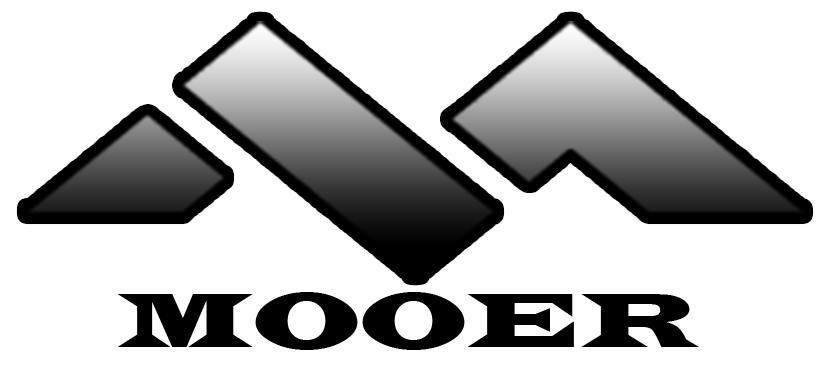
<style>
.page{position:relative;width:840px;height:384px;background:#ffffff}
.page>*{position:absolute;margin:0}
.t1{font:80px "LatinWide";color:#000000}
</style>
<div class="page">
<p class="t1" style="left:118px;top:292px;width:581px;height:58px">MOOER</p>
</div>
